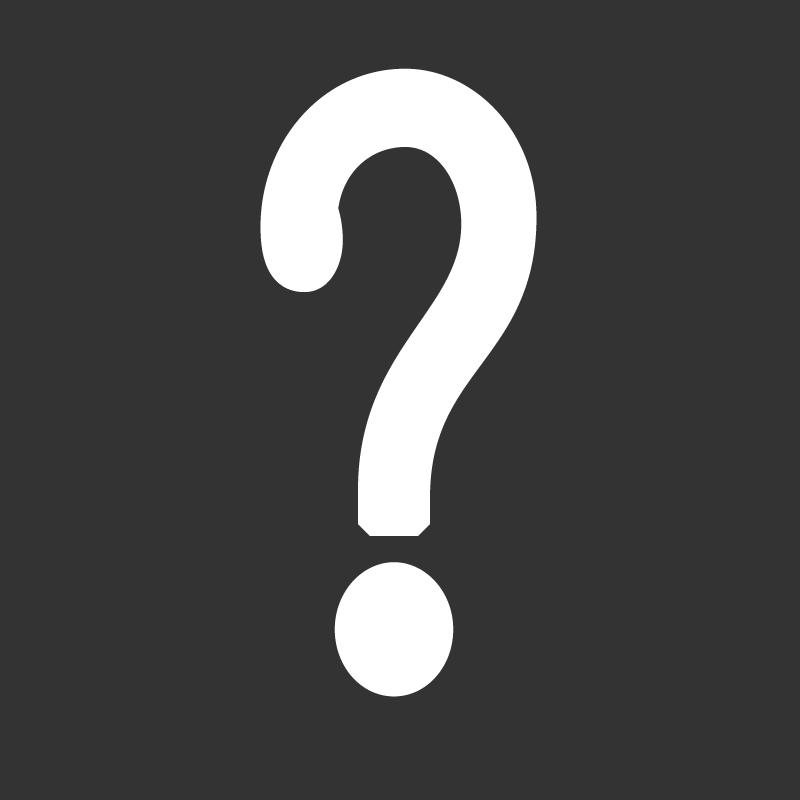
<style>
.page{position:relative;width:800px;height:800px;background:#333333}
.page>*{position:absolute;margin:0}
.t1{font:968px "PrestigeEliteStd-Bd";letter-spacing:0.01em;color:#ffffff;font-weight:bold;scale:0.83 1}
</style>
<div class="page">
<p class="t1" style="left:260px;top:68px;width:277px;height:629px">?</p>
</div>
